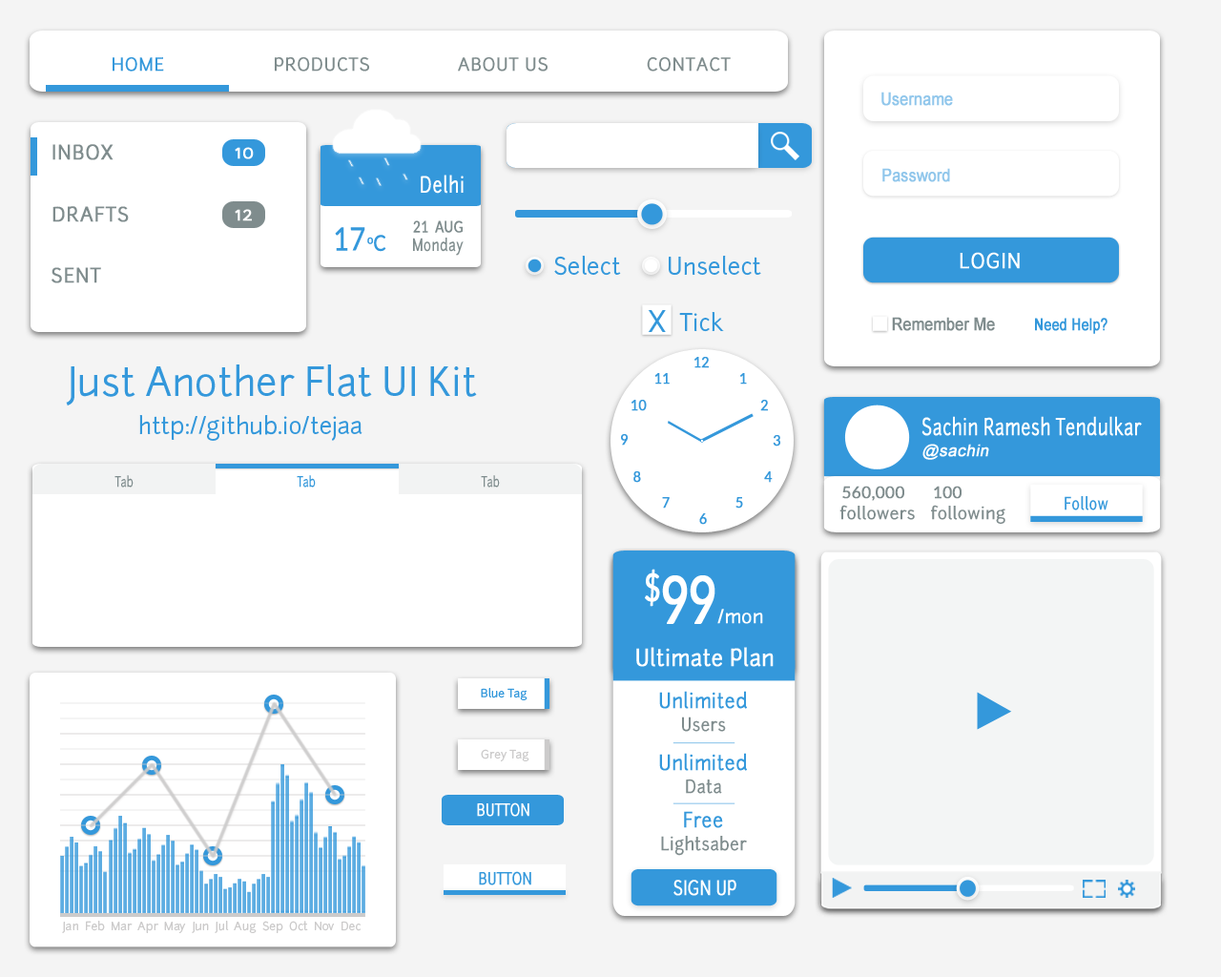
<style>
.page{position:relative;width:1221px;height:977px;background:#ffffff}
.page>*{position:absolute;margin:0}
.t1{font:17.2px "Junction";letter-spacing:0.025em;color:#3498db;font-weight:bold}
.t2{font:17.2px "Junction";letter-spacing:0.025em;color:#7f8c8d;font-weight:bold}
.t3{font:17.3px "ArialMT";letter-spacing:-0.01em;color:#90c6eb;font-weight:bold;scale:0.88 1}
.t4{font:19.1px "Junction";letter-spacing:0.025em;color:#7f8c8d;font-weight:bold}
.t5{font:19.1px "Junction";letter-spacing:0.025em;color:#ffffff;font-weight:bold}
.t6{font:21.4px "Junction";letter-spacing:0.025em;color:#ffffff;font-weight:bold;scale:0.79 1}
.t7{font:16px "Lato-Regular";letter-spacing:0.025em;color:#7f8c8d;font-weight:bold;scale:0.79 1}
.t8{font:32px "Lato-Regular";color:#3498db;font-weight:bold;scale:0.86 1}
.t9{font:21.4px "Lato-Regular";color:#3498db;font-weight:bold;scale:0.86 1}
.t10{font:16px "Junction";letter-spacing:0.025em;color:#7f8c8d;font-weight:bold;scale:0.79 1}
.t11{font:22.9px "Junction";color:#3498db}
.t12{font:19.7px "Junction";letter-spacing:0.025em;color:#ffffff;font-weight:bold;scale:0.97 1}
.t13{font:28.6px "Junction";color:#3498db}
.t14{font:17.3px "ArialMT";letter-spacing:-0.01em;color:#7f8c8d;font-weight:bold;scale:0.88 1}
.t15{font:16.5px "ArialMT";color:#3498db;font-weight:bold;scale:0.81 1}
.t16{font:38.2px "Junction";color:#3498db}
.t17{font:14.7px "Lato-Regular";letter-spacing:0.005em;color:#3498db;font-weight:bold;scale:0.91 1}
.t18{font:22.4px "Junction";letter-spacing:0.01em;color:#ffffff;font-weight:bold;scale:0.75 1}
.t19{font:16.3px "ArialMT";color:#ffffff;font-weight:bold;font-style:italic}
.t20{font:13.7px "Junction";letter-spacing:-0.005em;color:#7f8c8d;font-weight:bold;scale:0.75 1}
.t21{font:13.7px "Junction";letter-spacing:-0.005em;color:#3498db;font-weight:bold;scale:0.75 1}
.t22{font:16.3px "Lato-Regular";color:#7f8c8d;font-weight:bold}
.t23{font:16.3px "Junction";letter-spacing:0.025em;color:#3498db;font-weight:bold;scale:0.83 1}
.t24{font:16.3px "Junction";color:#7f8c8d;font-weight:bold}
.t25{font:65.8px "Lato-Regular";letter-spacing:-0.05em;color:#ffffff;font-weight:bold;scale:0.75 1}
.t26{font:18.3px "Junction";letter-spacing:-0.005em;color:#ffffff;font-weight:bold}
.t27{font:22.6px "Junction";letter-spacing:0.005em;color:#ffffff;font-weight:bold;scale:0.9 1}
.t28{font:11.4px "Junction";color:#3498db}
.t29{font:20.1px/22.8px "Junction";letter-spacing:0.005em;color:#3498db;font-weight:bold;scale:0.9 1}
.t30{font:17.6px/22.8px "Junction";letter-spacing:0.005em;color:#7f8c8d;font-weight:bold;scale:0.9 1}
.t31{font:11.4px "Junction";color:#cccbcb}
.t32{font:16px "Junction";letter-spacing:-0.01em;color:#ffffff;font-weight:bold;scale:0.83 1}
.t33{font:16px "Junction";letter-spacing:-0.01em;color:#3498db;font-weight:bold;scale:0.83 1}
.t34{font:19.2px "Junction";letter-spacing:-0.01em;color:#ffffff;font-weight:bold;scale:0.83 1}
</style>
<div class="page">
<p class="t1" style="left:113px;top:57px;width:51px;height:15px">HOME</p>
<p class="t2" style="left:275px;top:57px;width:94px;height:15px">PRODUCTS</p>
<p class="t2" style="left:458px;top:57px;width:89px;height:15px">ABOUT US</p>
<p class="t2" style="left:647px;top:57px;width:84px;height:15px">CONTACT</p>
<p class="t3" style="left:881px;top:92px;width:72px;height:14px">Username</p>
<p class="t4" style="left:52px;top:144px;width:62px;height:16px">INBOX</p>
<p class="t5" style="left:235px;top:147px;width:19px;height:12px">10</p>
<p class="t3" style="left:882px;top:168px;width:68px;height:14px">Password</p>
<p class="t6" style="left:421px;top:175px;width:43px;height:19px">Delhi</p>
<p class="t4" style="left:52px;top:206px;width:77px;height:16px">DRAFTS</p>
<p class="t5" style="left:235px;top:209px;width:17px;height:12px">12</p>
<p class="t7" style="left:413px;top:220px;width:50px;height:13px">21  AUG</p>
<p class="t8" style="left:335px;top:227px;width:30px;height:24px">17</p>
<p class="t9" style="left:367px;top:235px;width:19px;height:17px">oC</p>
<p class="t10" style="left:413px;top:237px;width:51px;height:19px">Monday</p>
<p class="t11" style="left:554px;top:256px;width:67px;height:20px">Select</p>
<p class="t11" style="left:669px;top:256px;width:92px;height:20px">Unselect</p>
<p class="t12" style="left:960px;top:252px;width:60px;height:17px">LOGIN</p>
<p class="t4" style="left:52px;top:267px;width:49px;height:16px">SENT</p>
<p class="t13" style="left:648px;top:310px;width:18px;height:22px">X</p>
<p class="t11" style="left:679px;top:312px;width:45px;height:20px">Tick</p>
<p class="t14" style="left:892px;top:317px;width:103px;height:14px">Remember Me</p>
<p class="t15" style="left:1035px;top:318px;width:72px;height:16px">Need Help?</p>
<p class="t16" style="left:66px;top:364px;width:411px;height:41px">Just Another Flat UI Kit</p>
<p class="t17" style="left:694px;top:357px;width:15px;height:11px">12</p>
<p class="t17" style="left:654px;top:373px;width:16px;height:11px">11</p>
<p class="t17" style="left:740px;top:373px;width:7px;height:11px">1</p>
<p class="t17" style="left:631px;top:400px;width:16px;height:11px">10</p>
<p class="t17" style="left:760px;top:400px;width:8px;height:11px">2</p>
<p class="t11" style="left:139px;top:415px;width:223px;height:26px">http://github.io/tejaa</p>
<p class="t18" style="left:921px;top:416px;width:221px;height:20px">Sachin Ramesh Tendulkar</p>
<p class="t17" style="left:621px;top:434px;width:7px;height:11px">9</p>
<p class="t17" style="left:773px;top:435px;width:7px;height:11px">3</p>
<p class="t19" style="left:922px;top:444px;width:67px;height:16px">@sachin</p>
<p class="t17" style="left:633px;top:471px;width:8px;height:12px">8</p>
<p class="t17" style="left:764px;top:471px;width:9px;height:12px">4</p>
<p class="t20" style="left:114px;top:475px;width:20px;height:12px">Tab</p>
<p class="t21" style="left:297px;top:475px;width:19px;height:12px">Tab</p>
<p class="t20" style="left:481px;top:475px;width:19px;height:12px">Tab</p>
<p class="t22" style="left:842px;top:485px;width:62px;height:16px">560,000</p>
<p class="t22" style="left:934px;top:485px;width:27px;height:14px">100</p>
<p class="t17" style="left:662px;top:497px;width:8px;height:11px">7</p>
<p class="t17" style="left:735px;top:497px;width:8px;height:11px">5</p>
<p class="t23" style="left:1064px;top:496px;width:44px;height:14px">Follow</p>
<p class="t24" style="left:839px;top:505px;width:76px;height:15px">followers</p>
<p class="t24" style="left:931px;top:505px;width:74px;height:19px">following</p>
<p class="t17" style="left:699px;top:513px;width:8px;height:12px">6</p>
<p class="t25" style="left:645px;top:568px;width:70px;height:56px">$99</p>
<p class="t26" style="left:717px;top:609px;width:46px;height:15px">/mon</p>
<p class="t27" style="left:636px;top:647px;width:138px;height:20px">Ultimate Plan</p>
<p class="t28" style="left:481px;top:688px;width:46px;height:12px">Blue Tag</p>
<p class="t29" style="left:659px;top:691px;width:88px;height:41px;text-align:center">Unlimited <br><span class="t30">Users</span></p>
<p class="t31" style="left:481px;top:749px;width:48px;height:12px">Grey Tag</p>
<p class="t29" style="left:659px;top:753px;width:88px;height:41px;text-align:center">Unlimited <br><span class="t30">Data</span></p>
<p class="t32" style="left:477px;top:802px;width:52px;height:14px">BUTTON</p>
<p class="t30" style="left:661px;top:811px;width:86px;height:45px;text-align:center"><span class="t29">Free <br></span>Lightsaber</p>
<p class="t33" style="left:479px;top:871px;width:52px;height:14px">BUTTON</p>
<p class="t34" style="left:673px;top:879px;width:63px;height:17px">SIGN UP</p>
<p class="t31" style="left:62px;top:920px;width:299px;height:13px">Jan  Feb  Mar  Apr  May  Jun  Jul  Aug  Sep  Oct  Nov  Dec</p>
</div>
